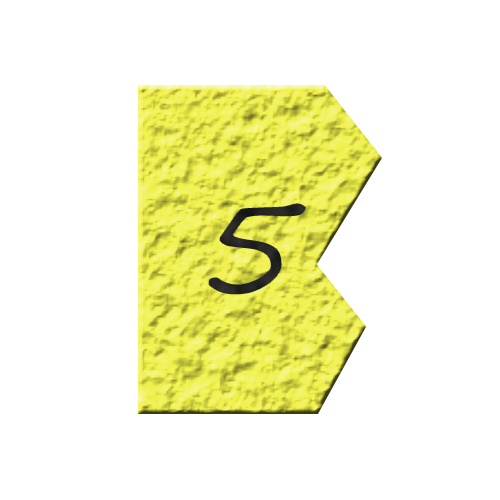
<style>
.page{position:relative;width:500px;height:500px;background:#ffffff}
.page>*{position:absolute;margin:0}
.t1{font:140px "SegoeScript";color:#272726}
</style>
<div class="page">
<p class="t1" style="left:207px;top:202px;width:100px;height:94px">5</p>
</div>
